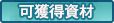
<style>
.page{position:relative;width:114px;height:23px}
.page>*{position:absolute;margin:0}
.t1{font:15px "GothicMB101Pr6N-Medium";color:#fff4f2}
</style>
<div class="page">
<p class="t1" style="left:19px;top:4px;width:75px;height:15px">可獲得資材</p>
</div>
